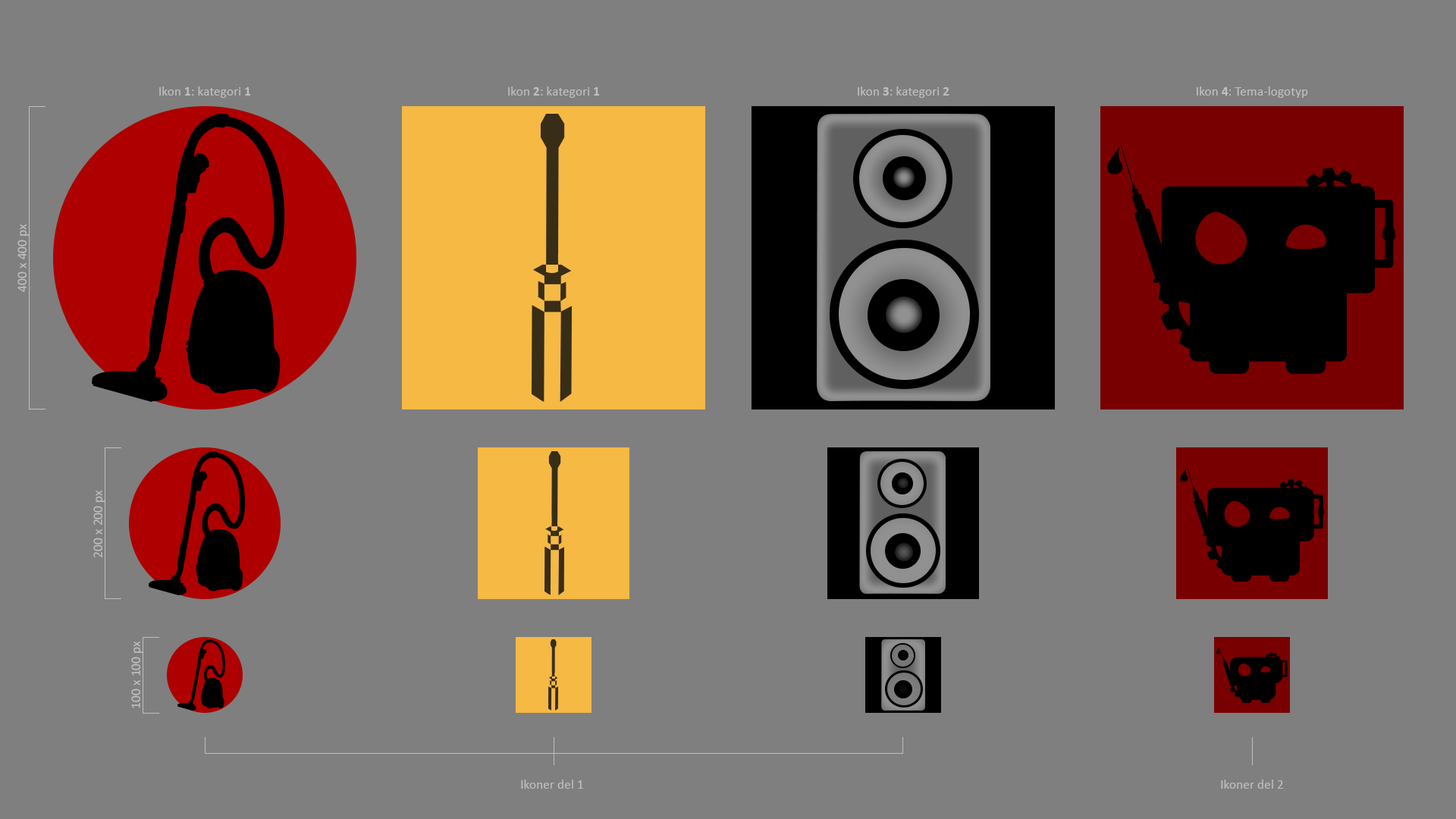
<style>
.page{position:relative;width:1456px;height:819px;background:#7f7f7f}
.page>*{position:absolute;margin:0}
.t1{font:22.7px "Calibri";color:#bfbfbf}
.t2{font:22.7px "Calibri-Bold";color:#bfbfbf}
</style>
<div class="page">
<p class="t1" style="left:159px;top:86px;width:92px;height:12px">Ikon <span class="t2">1</span>: kategori <span class="t2">1</span></p>
<p class="t1" style="left:508px;top:86px;width:92px;height:12px">Ikon <span class="t2">2</span>: kategori <span class="t2">1</span></p>
<p class="t1" style="left:858px;top:86px;width:91px;height:12px">Ikon <span class="t2">3</span>: kategori <span class="t2">2</span></p>
<p class="t1" style="left:1197px;top:86px;width:111px;height:12px">Ikon <span class="t2">4</span>: Tema-logotyp</p>
<p class="t1" style="left:17px;top:224px;width:12px;height:68px;rotate:-90deg">400 x 400 px</p>
<p class="t1" style="left:93px;top:490px;width:12px;height:67px;rotate:-90deg">200 x 200 px</p>
<p class="t1" style="left:131px;top:641px;width:12px;height:67px;rotate:-90deg">100 x 100 px</p>
<p class="t1" style="left:521px;top:780px;width:62px;height:9px">Ikoner del 1</p>
<p class="t1" style="left:1221px;top:780px;width:62px;height:9px">Ikoner del 2</p>
</div>
